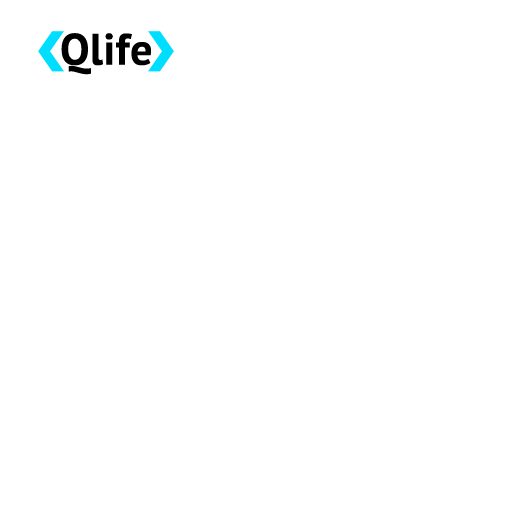
<style>
.page{position:relative;width:512px;height:512px;background:#ffffff}
.page>*{position:absolute;margin:0}
.t1{font:44px "PTSans-Bold";letter-spacing:0.01em;color:#000000}
</style>
<div class="page">
<p class="t1" style="left:61px;top:33px;width:90px;height:42px">Qlife</p>
</div>
